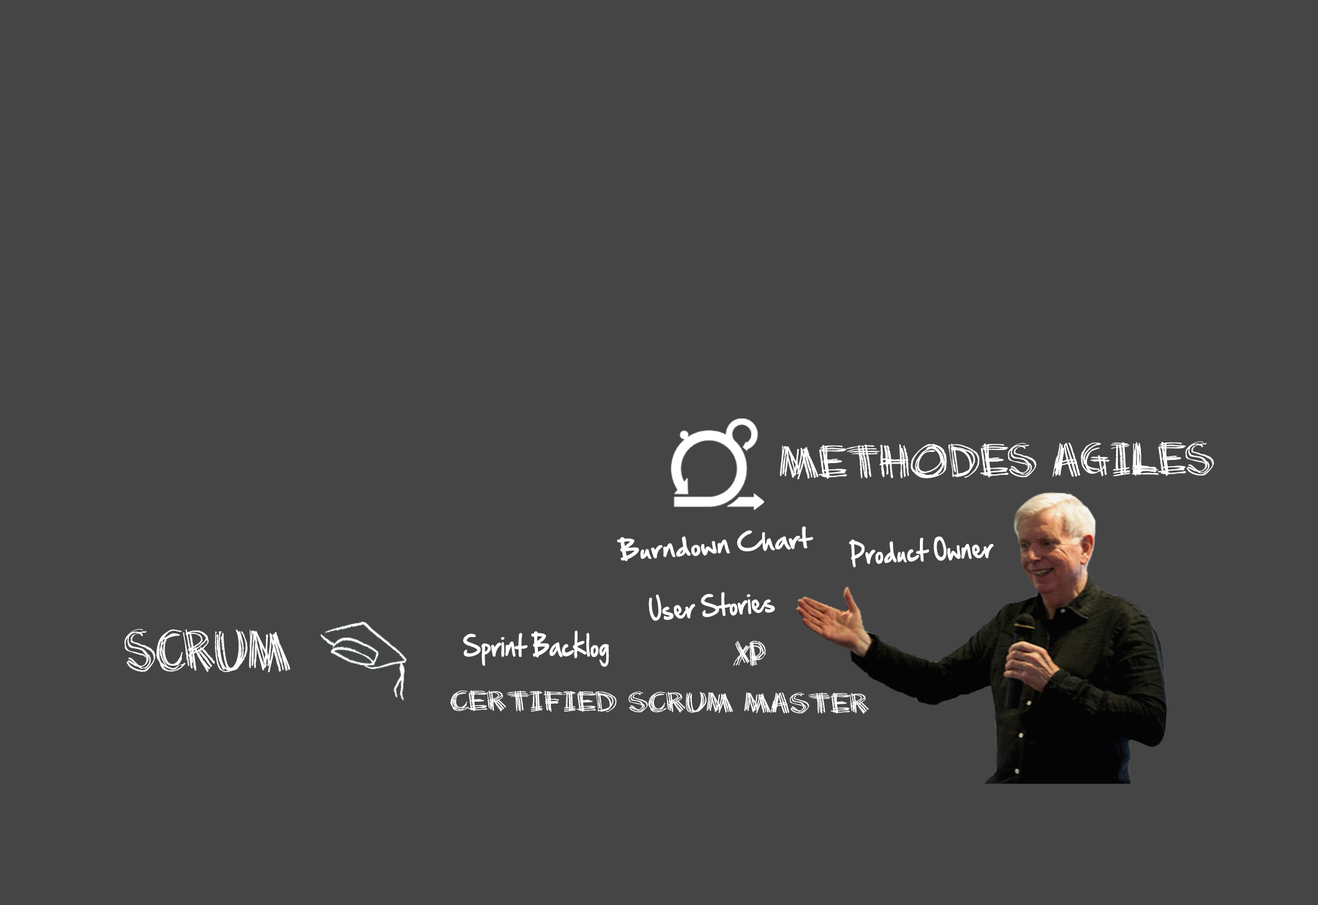
<style>
.page{position:relative;width:1318px;height:905px;background:#454545}
.page>*{position:absolute;margin:0}
.t1{font:33.9px "Scratchmyback";color:#ffffff}
.t2{font:23px "HandOfSean";color:#ffffff;scale:1.04 1}
.t3{font:25px "HandOfSean";color:#ffffff;scale:0.82 1}
.t4{font:42.6px "Scratchmyback";color:#ffffff;scale:0.86 1}
.t5{font:25px "Scratchmyback";color:#ffffff;scale:0.82 1}
.t6{font:20.6px "Scratchmyback";color:#ffffff;scale:1.12 1}
</style>
<div class="page">
<p class="t1" style="left:780px;top:441px;width:435px;height:38px;rotate:-1deg">Methodes Agiles</p>
<p class="t2" style="left:617px;top:526px;width:196px;height:35px;rotate:-4deg">Burndown Chart</p>
<p class="t3" style="left:849px;top:536px;width:145px;height:31px;rotate:-3deg">Product Owner</p>
<p class="t3" style="left:649px;top:591px;width:126px;height:30px;rotate:-4deg">User Stories</p>
<p class="t4" style="left:124px;top:629px;width:167px;height:43px">Scrum</p>
<p class="t3" style="left:463px;top:630px;width:146px;height:37px">Sprint Backlog</p>
<p class="t5" style="left:733px;top:641px;width:33px;height:25px">XP</p>
<p class="t6" style="left:450px;top:690px;width:419px;height:24px">Certified Scrum Master</p>
</div>
